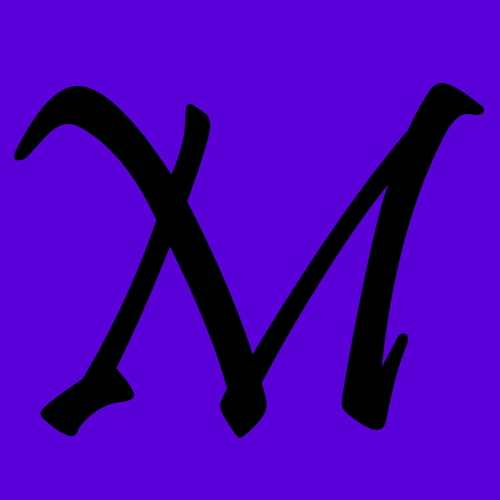
<style>
.page{position:relative;width:500px;height:500px;background:#5a00d8}
.page>*{position:absolute;margin:0}
.t1{font:500.7px "Pristina-Regular";color:#000000}
</style>
<div class="page">
<p class="t1" style="left:14px;top:83px;width:470px;height:355px">M</p>
</div>
